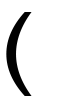
<style>
.page{position:relative;width:71px;height:96px;background:#ffffff}
.page>*{position:absolute;margin:0}
.t1{font:89.4px "MicrosoftSansSerif";color:#010101;scale:1.19 1}
</style>
<div class="page">
<p class="t1" style="left:6px;top:12px;width:26px;height:84px">(</p>
</div>
